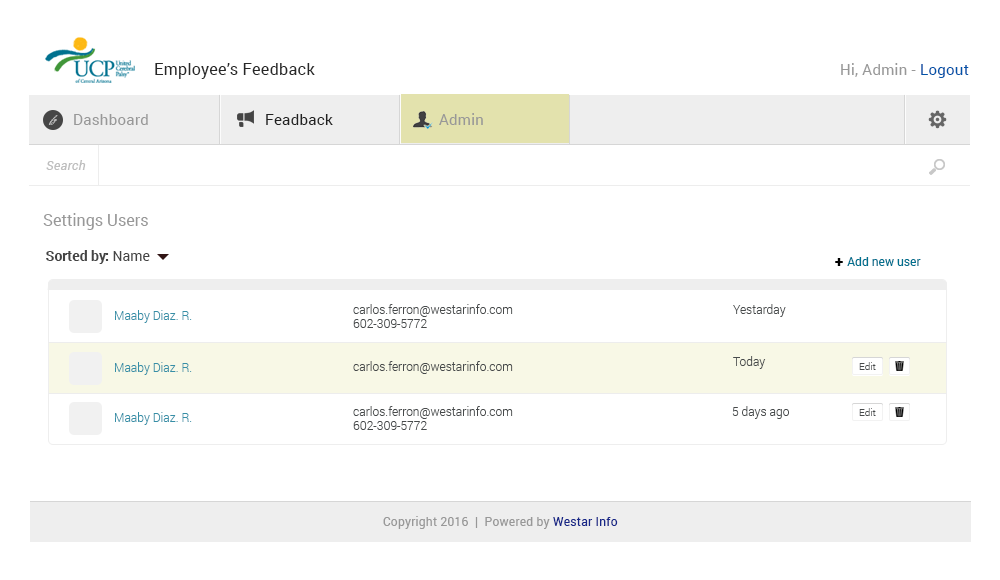
<style>
.page{position:relative;width:1000px;height:580px;background:#ffffff}
.page>*{position:absolute;margin:0}
.t1{font:16px "Roboto-Regular";letter-spacing:0.02em;color:#282828}
.t2{font:15px "Roboto-Regular";letter-spacing:0.02em;color:#989898}
.t3{font:15px "Roboto-Regular";letter-spacing:0.02em;color:#0053a8}
.t4{font:10px "BickhamScriptPro-Regular";letter-spacing:0.02em;color:#bababa}
.t5{font:15px "Roboto-Regular";letter-spacing:0.02em;color:#212121}
.t6{font:13px "Roboto-Italic";letter-spacing:0.02em;color:#bebebe}
.t7{font:16px "Roboto-Regular";color:#989898}
.t8{font:14px "Roboto-Bold";color:#444444}
.t9{font:14px "Roboto-Regular";color:#444444}
.t10{font:12px "Roboto-Regular";color:#00718f}
.t11{font:16px "Roboto-Black";color:#000000}
.t12{font:12px/14px "Roboto-Light";color:#474a4b}
.t13{font:12px "Roboto-Light";color:#474a4b}
.t14{font:12px "Roboto-Light";color:#368fa7}
.t15{font:10px "Roboto-Light";color:#474a4b}
.t16{font:12px "Roboto-Regular";letter-spacing:0.02em;color:#989898}
.t17{font:12px "Roboto-Regular";letter-spacing:0.02em;color:#172788}
</style>
<div class="page">
<p class="t1" style="left:155px;top:63px;width:160px;height:16px">Employee’s Feedback</p>
<p class="t2" style="left:841px;top:63px;width:128px;height:15px">Hi, Admin - <span class="t3">Logout</span></p>
<p class="t2" style="left:439px;top:113px;width:44px;height:12px">Admin</p>
<p class="t4" style="left:48px;top:115px;width:10px;height:10px">fg</p>
<p class="t2" style="left:74px;top:114px;width:74px;height:11px">Dashboard</p>
<p class="t5" style="left:266px;top:114px;width:67px;height:11px">Feadback</p>
<p class="t6" style="left:46px;top:160px;width:40px;height:10px">Search</p>
<p class="t7" style="left:43px;top:213px;width:105px;height:17px">Settings Users</p>
<p class="t8" style="left:46px;top:250px;width:104px;height:14px">Sorted by:<span class="t9"> Name</span></p>
<p class="t10" style="left:847px;top:257px;width:74px;height:9px">Add new user</p>
<p class="t11" style="left:835px;top:258px;width:8px;height:8px">+</p>
<p class="t12" style="left:353px;top:304px;width:160px;height:24px">carlos.ferron@westarinfo.com<br>602-309-5772</p>
<p class="t13" style="left:733px;top:304px;width:53px;height:13px">Yestarday</p>
<p class="t14" style="left:115px;top:310px;width:77px;height:13px">Maaby Diaz. R.</p>
<p class="t14" style="left:115px;top:362px;width:77px;height:13px">Maaby Diaz. R.</p>
<p class="t13" style="left:353px;top:361px;width:160px;height:13px">carlos.ferron@westarinfo.com</p>
<p class="t13" style="left:733px;top:356px;width:33px;height:13px">Today</p>
<p class="t15" style="left:859px;top:362px;width:17px;height:8px">Edit</p>
<p class="t14" style="left:115px;top:412px;width:77px;height:13px">Maaby Diaz. R.</p>
<p class="t12" style="left:353px;top:406px;width:160px;height:24px">carlos.ferron@westarinfo.com<br>602-309-5772</p>
<p class="t13" style="left:732px;top:406px;width:57px;height:13px">5 days ago</p>
<p class="t15" style="left:859px;top:408px;width:17px;height:8px">Edit</p>
<p class="t16" style="left:383px;top:516px;width:235px;height:13px">Copyright 2016  |  Powered by <span class="t17">Westar Info</span></p>
</div>
